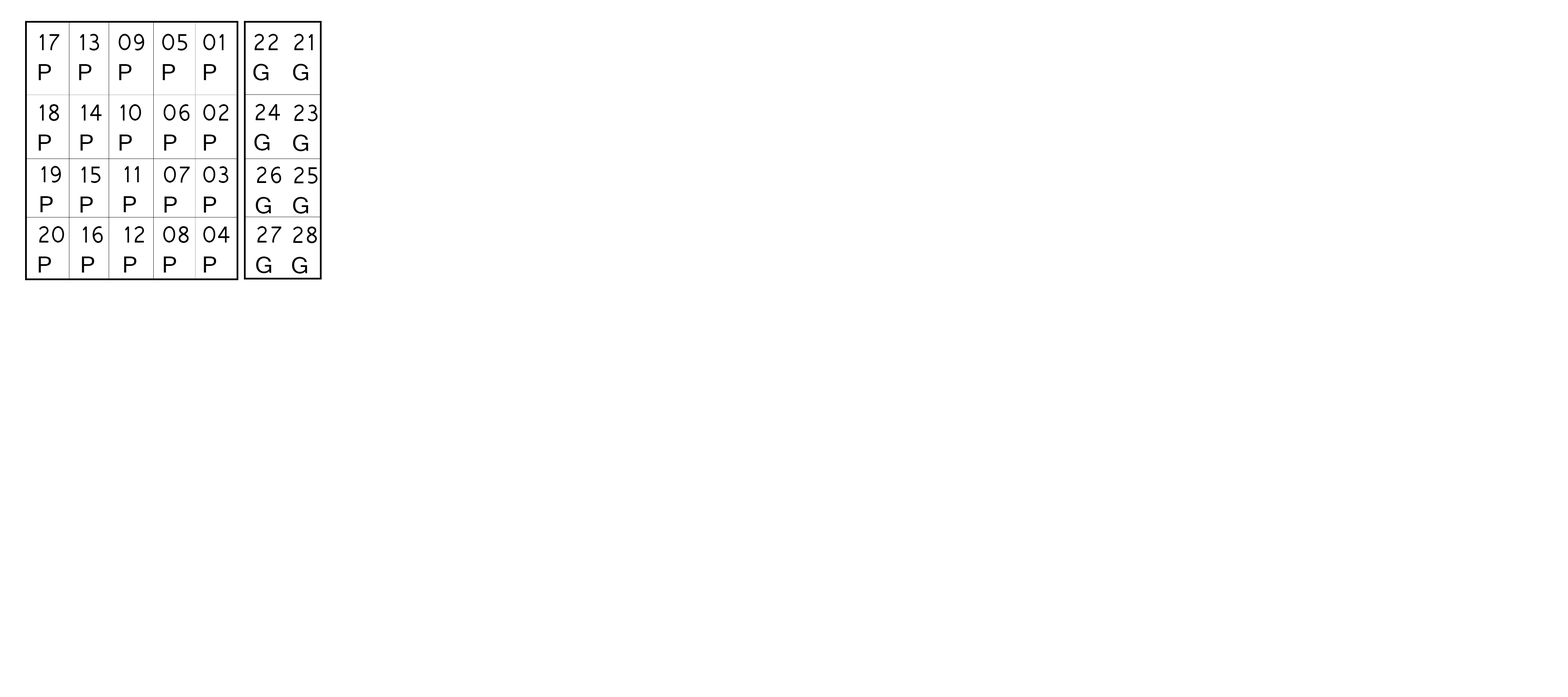
<style>
.page{position:relative;width:1568px;height:697px;background:#ffffff}
.page>*{position:absolute;margin:0}
.t1{font:25.1px "Vrinda";color:#000000}
</style>
<div class="page">
<p class="t1" style="left:39px;top:34px;width:21px;height:46px">17<br>P</p>
<p class="t1" style="left:79px;top:34px;width:20px;height:46px">13<br>P</p>
<p class="t1" style="left:118px;top:34px;width:26px;height:46px">09 <br>P</p>
<p class="t1" style="left:162px;top:34px;width:25px;height:46px">05<br>P</p>
<p class="t1" style="left:203px;top:34px;width:21px;height:46px">01<br>P</p>
<p class="t1" style="left:253px;top:34px;width:25px;height:46px">22<br>G</p>
<p class="t1" style="left:293px;top:34px;width:20px;height:46px">21<br>G</p>
<p class="t1" style="left:39px;top:104px;width:20px;height:47px">18<br>P</p>
<p class="t1" style="left:80px;top:105px;width:22px;height:46px">14<br>P</p>
<p class="t1" style="left:120px;top:104px;width:21px;height:47px">10<br>P</p>
<p class="t1" style="left:163px;top:104px;width:27px;height:47px">06<br>P</p>
<p class="t1" style="left:203px;top:104px;width:26px;height:47px">02<br>P</p>
<p class="t1" style="left:254px;top:104px;width:26px;height:47px">24<br>G</p>
<p class="t1" style="left:293px;top:105px;width:25px;height:46px">23<br>G</p>
<p class="t1" style="left:40px;top:166px;width:21px;height:46px">19<br>P</p>
<p class="t1" style="left:80px;top:167px;width:21px;height:46px">15<br>P</p>
<p class="t1" style="left:124px;top:166px;width:15px;height:46px">11<br>P</p>
<p class="t1" style="left:164px;top:166px;width:26px;height:47px">07<br>P</p>
<p class="t1" style="left:203px;top:166px;width:26px;height:47px">03<br>P</p>
<p class="t1" style="left:256px;top:167px;width:25px;height:47px">26<br>G</p>
<p class="t1" style="left:293px;top:167px;width:25px;height:47px">25<br>G</p>
<p class="t1" style="left:39px;top:226px;width:25px;height:46px">20<br>P</p>
<p class="t1" style="left:82px;top:226px;width:21px;height:46px">16<br>P</p>
<p class="t1" style="left:124px;top:226px;width:20px;height:46px">12<br>P</p>
<p class="t1" style="left:163px;top:226px;width:26px;height:46px">08<br>P</p>
<p class="t1" style="left:203px;top:226px;width:27px;height:46px">04<br>P</p>
<p class="t1" style="left:256px;top:226px;width:26px;height:47px">27<br>G</p>
<p class="t1" style="left:292px;top:226px;width:25px;height:48px">28<br>G</p>
</div>
